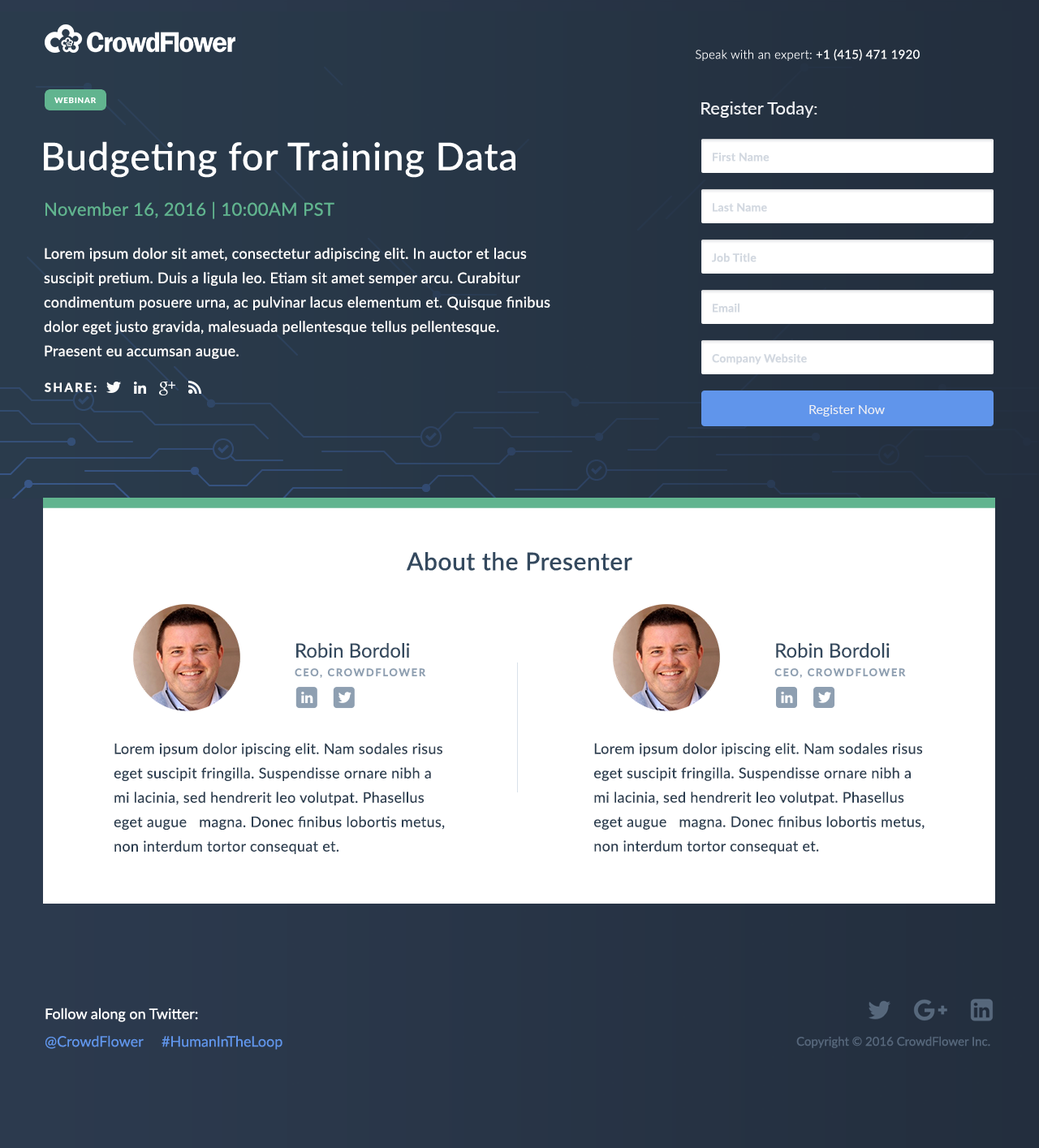
<style>
.page{position:relative;width:1039px;height:1148px;background:#ffffff}
.page>*{position:absolute;margin:0}
.t1{font:12.2px "Lato-Light";letter-spacing:0.018em;color:#ffffff}
.t2{font:12.2px "Lato-Regular";letter-spacing:0.018em;color:#ffffff}
.t3{font:17.9px "Lato-Regular";color:#eef0f4}
.t4{font:38.1px "Lato-Medium";letter-spacing:0.018em;color:#ffffff}
.t5{font:11.4px "Lato-Bold";letter-spacing:0.018em;color:#d2d8e0}
.t6{font:17.9px "Lato-Regular";letter-spacing:0.018em;color:#61b48f}
.t7{font:14.6px/24.4px "Lato-Regular";letter-spacing:0.018em;color:#ffffff}
.t8{font:12.2px "Lato-Bold";letter-spacing:0.16em;color:#ffffff;text-transform:uppercase}
.t9{font:13px "Lato-Regular";color:#eef0f4}
.t10{font:24.4px "Lato-Medium";letter-spacing:0.018em;color:#34495e}
.t11{font:10.6px/18.7px "Lato-Bold";letter-spacing:0.125em;color:#8e9fb1;text-transform:uppercase}
.t12{font:19.5px/21.1px "Lato-Regular";color:#34495e}
.t13{font:14.6px/24.4px "Lato-Regular";letter-spacing:0.018em;color:#2c3e50}
.t14{font:14.6px/27.6px "Lato-Regular";color:#6095eb}
.t15{font:14.6px/27.6px "Lato-Medium";color:#ffffff}
.t16{font:12.2px "Lato-Regular";color:#56677b}
</style>
<div class="page">
<p class="t1" style="left:696px;top:49px;width:224px;height:12px">Speak with an expert:<span class="t2"> +1 (415) 471 1920</span></p>
<p class="t3" style="left:701px;top:101px;width:116px;height:17px">Register Today:</p>
<p class="t4" style="left:44px;top:141px;width:471px;height:37px">Budgeting for Training Data</p>
<p class="t5" style="left:713px;top:152px;width:56px;height:10px">First Name</p>
<p class="t6" style="left:45px;top:201px;width:289px;height:18px">November 16, 2016 | 10:00AM PST</p>
<p class="t5" style="left:713px;top:203px;width:54px;height:9px">Last Name</p>
<p class="t7" style="left:44px;top:248px;width:506px;height:111px">Lorem ipsum dolor sit amet, consectetur adipiscing elit. In auctor et lacus suscipit pretium. Duis a ligula leo. Etiam sit amet semper arcu. Curabitur condimentum posuere urna, ac pulvinar lacus elementum et. Quisque finibus dolor eget justo gravida, malesuada pellentesque tellus pellentesque. Praesent eu accumsan augue.</p>
<p class="t5" style="left:712px;top:252px;width:44px;height:10px">Job Title</p>
<p class="t5" style="left:713px;top:303px;width:26px;height:9px">Email</p>
<p class="t5" style="left:712px;top:353px;width:95px;height:11px">Company Website</p>
<p class="t8" style="left:45px;top:382px;width:52px;height:10px">Share:</p>
<p class="t9" style="left:809px;top:405px;width:76px;height:11px">Register Now</p>
<p class="t10" style="left:407px;top:552px;width:225px;height:19px">About the Presenter</p>
<p class="t11" style="left:295px;top:643px;width:131px;height:35px"><span class="t12">Robin Bordoli<br></span>CEO, CrowdFlower</p>
<p class="t11" style="left:774px;top:643px;width:132px;height:35px"><span class="t12">Robin Bordoli<br></span>CEO, CrowdFlower</p>
<p class="t13" style="left:114px;top:743px;width:331px;height:111px">Lorem ipsum dolor ipiscing elit. Nam sodales risus eget suscipit fringilla. Suspendisse ornare nibh a mi lacinia, sed hendrerit leo volutpat. Phasellus eget augue   magna. Donec finibus lobortis metus, non interdum tortor consequat et.</p>
<p class="t13" style="left:593px;top:743px;width:332px;height:111px">Lorem ipsum dolor ipiscing elit. Nam sodales risus eget suscipit fringilla. Suspendisse ornare nibh a mi lacinia, sed hendrerit leo volutpat. Phasellus eget augue   magna. Donec finibus lobortis metus, non interdum tortor consequat et.</p>
<p class="t14" style="left:45px;top:1007px;width:237px;height:43px"><span class="t15">Follow along on Twitter:<br></span>@CrowdFlower #HumanInTheLoop</p>
<p class="t16" style="left:796px;top:1036px;width:194px;height:12px">Copyright © 2016 CrowdFlower Inc.</p>
</div>
